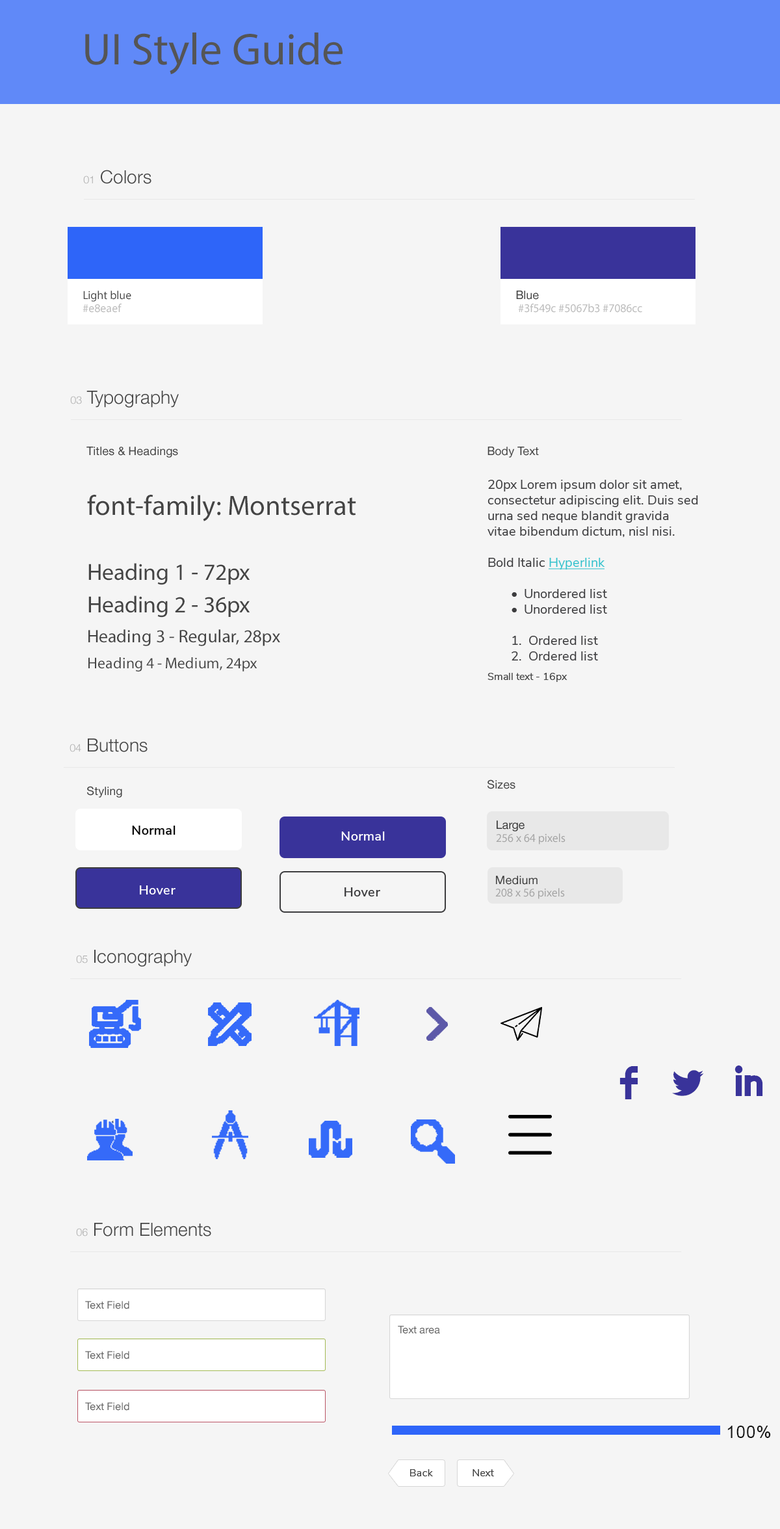
<style>
.page{position:relative;width:780px;height:1529px;background:#f5f5f5}
.page>*{position:absolute;margin:0}
.t1{font:44.8px "MyriadPro-Regular";color:#555555}
.t2{font:18.2px "HelveticaNeue-Light";color:#444444}
.t3{font:10.4px "HelveticaNeue-Light";color:#aaaaaa}
.t4{font:11.7px "MyriadPro-Regular";color:#444444}
.t5{font:11.7px/13px "MyriadPro-Regular";color:#bbbbbb}
.t6{font:11.7px "HelveticaNeue";color:#444444}
.t7{font:13px/15.6px "NunitoSans-Regular";color:#3d3d3f}
.t8{font:13px/15.6px "NunitoSans-Regular";color:#35c2cd;text-decoration:underline}
.t9{font:10.4px/19.5px "NunitoSans-Regular";color:#444444}
.t10{font:23.3px/32.4px "MyriadPro-Regular";color:#444444}
.t11{font:27.9px/32.4px "MyriadPro-Regular";color:#444444}
.t12{font:18.1px/29.8px "MyriadPro-Regular";color:#444444}
.t13{font:15.6px/25.9px "MyriadPro-Regular";color:#444444}
.t14{font:11.7px "HelveticaNeue";color:#3b3b3b}
.t15{font:13px "NunitoSans-SemiBold";letter-spacing:0.025em;color:#040404}
.t16{font:13px "NunitoSans-SemiBold";letter-spacing:0.025em;color:#ffffff}
.t17{font:11.7px "MyriadPro-Regular";color:#a4a4a4}
.t18{font:13px "NunitoSans-SemiBold";letter-spacing:0.025em;color:#3d3d3f}
.t19{font:53.7px "Socialico";letter-spacing:0.48em;color:#39339a;text-transform:uppercase}
.t20{font:10.4px "HelveticaNeue";color:#666666}
.t21{font:16.6px "ArialMT";letter-spacing:0.05em;color:#161616}
.t22{font:10.4px "NunitoSans-Regular";color:#454545}
</style>
<div class="page">
<p class="t1" style="left:85px;top:32px;width:258px;height:43px">UI Style Guide</p>
<p class="t2" style="left:83px;top:170px;width:68px;height:14px"><span class="t3">01</span> Colors</p>
<p class="t4" style="left:83px;top:291px;width:48px;height:22px">Light blue<br><span class="t5">#e8eaef</span></p>
<p class="t5" style="left:516px;top:291px;width:126px;height:22px"><span class="t6">Blue<br></span> #3f549c #5067b3 #7086cc</p>
<p class="t2" style="left:70px;top:391px;width:109px;height:17px"><span class="t3">03</span> Typography</p>
<p class="t6" style="left:86px;top:447px;width:92px;height:11px">Titles &amp; Headings</p>
<p class="t6" style="left:487px;top:447px;width:52px;height:11px">Body Text</p>
<p class="t7" style="left:487px;top:480px;width:211px;height:202px">20px Lorem ipsum dolor sit amet, consectetur adipiscing elit. Duis sed urna sed neque blandit gravida vitae bibendum dictum, nisl nisi.<br><br>Bold Italic <span class="t8">Hyperlink <br><br></span> •  Unordered list<br> •  Unordered list<br><br> 1.  Ordered list<br> 2.  Ordered list<br><span class="t9">Small text - 16px</span></p>
<p class="t10" style="left:87px;top:495px;width:269px;height:176px"><span class="t11"><br>font-family: Montserrat<br><br></span>Heading 1 - 72px<br>Heading 2 - 36px<br><span class="t12">Heading 3 - Regular, 28px<br></span><span class="t13">Heading 4 - Medium, 24px</span></p>
<p class="t2" style="left:70px;top:738px;width:78px;height:14px"><span class="t3">04</span> Buttons</p>
<p class="t6" style="left:87px;top:786px;width:35px;height:12px">Styling</p>
<p class="t6" style="left:487px;top:779px;width:28px;height:10px">Sizes</p>
<p class="t14" style="left:497px;top:820px;width:28px;height:11px">Large</p>
<p class="t15" style="left:132px;top:825px;width:43px;height:10px">Normal</p>
<p class="t16" style="left:341px;top:831px;width:44px;height:9px">Normal</p>
<p class="t17" style="left:496px;top:833px;width:69px;height:11px">256 x 64 pixels</p>
<p class="t14" style="left:496px;top:876px;width:42px;height:9px">Medium</p>
<p class="t16" style="left:140px;top:885px;width:35px;height:9px">Hover</p>
<p class="t18" style="left:344px;top:887px;width:36px;height:9px">Hover</p>
<p class="t17" style="left:495px;top:888px;width:70px;height:11px">208 x 56 pixels</p>
<p class="t2" style="left:76px;top:950px;width:116px;height:17px"><span class="t3">05</span> Iconography</p>
<p class="t19" style="left:619px;top:1065px;width:144px;height:34px">fli</p>
<p class="t2" style="left:76px;top:1223px;width:135px;height:13px"><span class="t3">06</span> Form Elements</p>
<p class="t20" style="left:85px;top:1301px;width:44px;height:8px">Text Field</p>
<p class="t20" style="left:398px;top:1325px;width:42px;height:9px">Text area</p>
<p class="t20" style="left:85px;top:1351px;width:44px;height:8px">Text Field</p>
<p class="t20" style="left:85px;top:1402px;width:44px;height:8px">Text Field</p>
<p class="t21" style="left:727px;top:1425px;width:44px;height:13px">100%</p>
<p class="t22" style="left:410px;top:1469px;width:23px;height:7px">Back</p>
<p class="t22" style="left:473px;top:1469px;width:21px;height:7px">Next</p>
</div>
